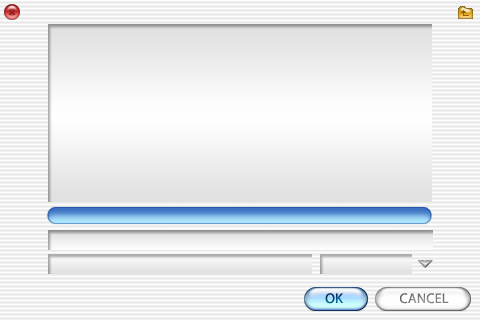
<style>
.page{position:relative;width:480px;height:320px}
.page>*{position:absolute;margin:0}
.t1{font:14px "Myriad-Roman";letter-spacing:0.02em}
.t2{font:14px "Myriad-Roman";letter-spacing:0.02em;color:#7d7d7d}
</style>
<div class="page">
<p class="t1" style="left:325px;top:293px;width:18px;height:11px">OK</p>
<p class="t2" style="left:400px;top:293px;width:49px;height:11px">CANCEL</p>
</div>
